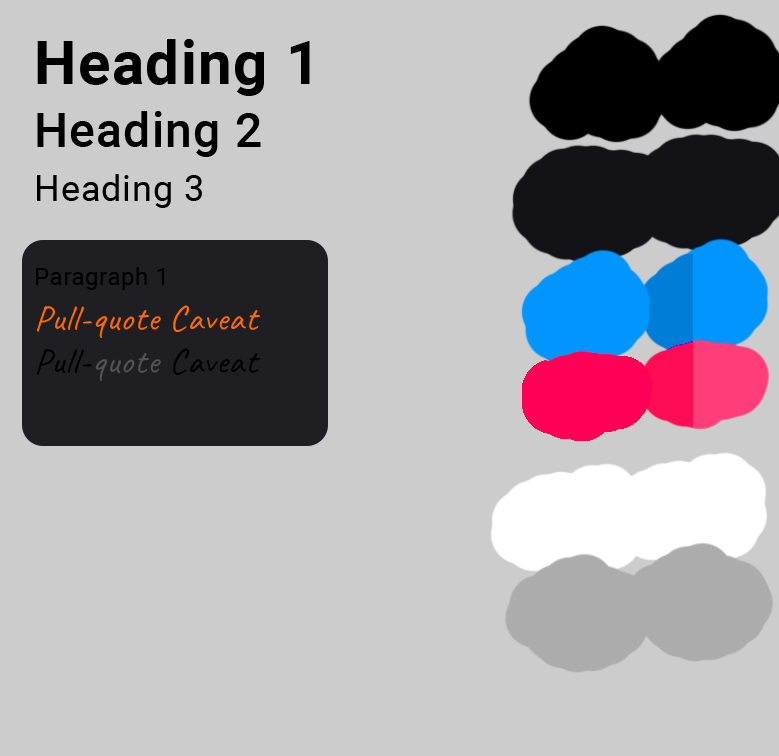
<style>
.page{position:relative;width:779px;height:756px;background:#cccccc}
.page>*{position:absolute;margin:0}
.t1{font:60px "Roboto-Bold";letter-spacing:0.025em;color:#000000}
.t2{font:48px "Roboto-Medium";letter-spacing:0.025em;color:#000000}
.t3{font:36px "Roboto-Regular";letter-spacing:0.025em;color:#000000}
.t4{font:24px "Roboto-Regular";letter-spacing:0.025em;color:#000000}
.t5{font:36px "Caveat-Regular";letter-spacing:0.025em;color:#ff6a00}
</style>
<div class="page">
<p class="t1" style="left:37px;top:39px;width:273px;height:57px">Heading 1</p>
<p class="t2" style="left:37px;top:111px;width:224px;height:46px">Heading 2</p>
<p class="t3" style="left:37px;top:174px;width:165px;height:34px">Heading 3</p>
<p class="t4" style="left:36px;top:267px;width:128px;height:23px">Paragraph 1</p>
<p class="t5" style="left:37px;top:305px;width:223px;height:33px">Pull-quote Caveat</p>
</div>
